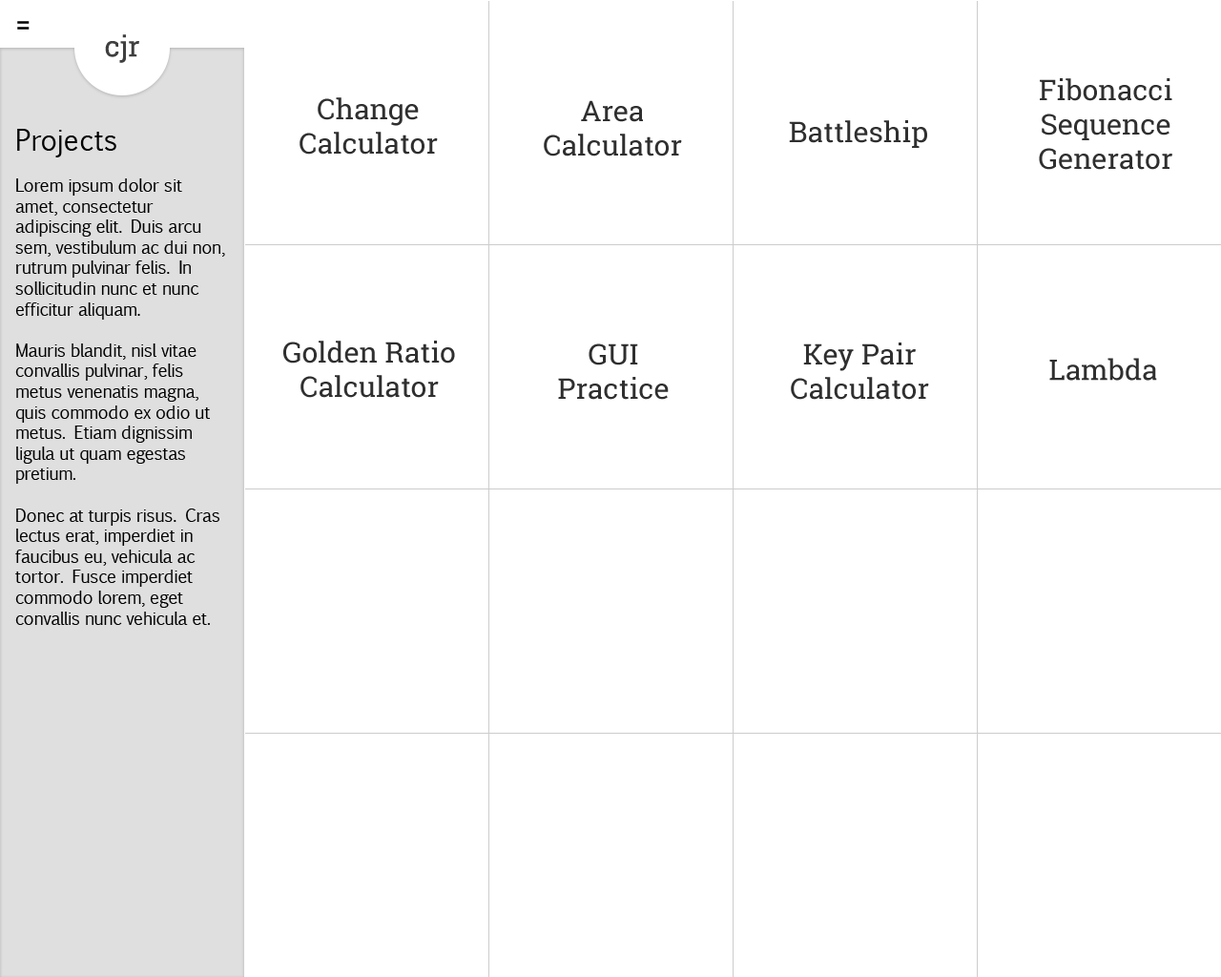
<style>
.page{position:relative;width:1221px;height:977px;background:#ffffff}
.page>*{position:absolute;margin:0}
.t1{font:28.6px "RobotoSlab-Regular";color:#000000}
.t2{font:28.6px "RobotoSlab-Regular";color:#3f3f3f}
.t3{font:28.6px "RobotoSlab-Regular";color:#2f2f2f}
.t4{font:17.2px "EuphemiaCAS";color:#000000}
.t5{font:28.6px "EuphemiaCAS";color:#000000}
</style>
<div class="page">
<p class="t1" style="left:17px;top:21px;width:13px;height:9px">=</p>
<p class="t2" style="left:105px;top:34px;width:34px;height:29px">cjr</p>
<p class="t3" style="left:1039px;top:78px;width:133px;height:92px;text-align:center">Fibonacci<br>Sequence<br>Generator</p>
<p class="t3" style="left:299px;top:97px;width:139px;height:58px;text-align:center">Change<br>Calculator</p>
<p class="t3" style="left:544px;top:100px;width:138px;height:56px;text-align:center">Area<br>Calculator</p>
<p class="t3" style="left:789px;top:120px;width:138px;height:28px">Battleship</p>
<p class="t4" style="left:15px;top:129px;width:210px;height:496px"><span class="t5">Projects<br><br></span>Lorem ipsum dolor sit amet, consectetur adipiscing elit. Duis arcu sem, vestibulum ac dui non, rutrum pulvinar felis. In sollicitudin nunc et nunc efficitur aliquam. <br><br>Mauris blandit, nisl vitae convallis pulvinar, felis metus venenatis magna, quis commodo ex odio ut metus. Etiam dignissim ligula ut quam egestas pretium. <br><br>Donec at turpis risus. Cras lectus erat, imperdiet in faucibus eu, vehicula ac tortor. Fusce imperdiet commodo lorem, eget convallis nunc vehicula et.</p>
<p class="t3" style="left:283px;top:341px;width:172px;height:57px;text-align:center">Golden Ratio<br>Calculator</p>
<p class="t3" style="left:558px;top:343px;width:111px;height:57px;text-align:center">GUI<br>Practice</p>
<p class="t3" style="left:791px;top:342px;width:138px;height:58px;text-align:center">Key Pair<br>Calculator</p>
<p class="t3" style="left:1049px;top:358px;width:108px;height:23px">Lambda</p>
</div>
